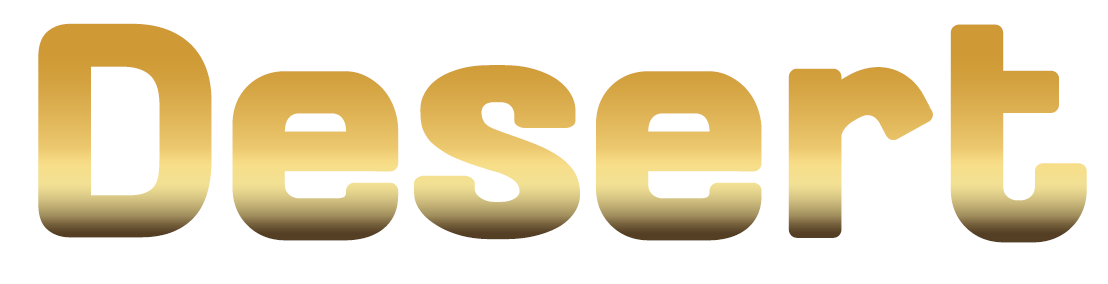
<style>
.page{position:relative;width:1108px;height:284px;background:#ffffff}
.page>*{position:absolute;margin:0}
.t1{font:251.9px "TTTogether"}
</style>
<div class="page">
<p class="t1" style="left:38px;top:23px;width:1049px;height:220px">Desert</p>
</div>
